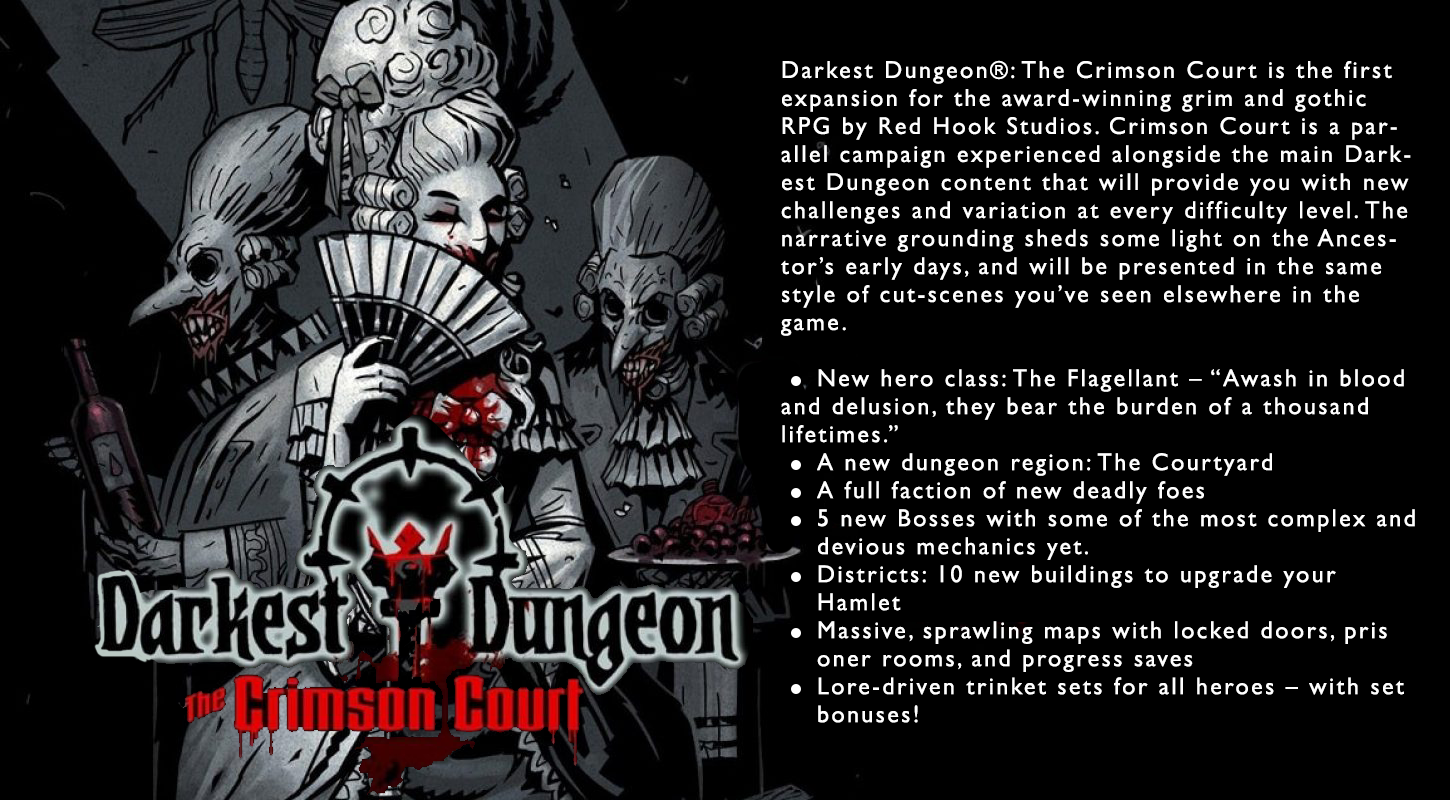
<style>
.page{position:relative;width:1450px;height:800px;background:#000000}
.page>*{position:absolute;margin:0}
.t1{font:24.5px/28px "GillSansMT";letter-spacing:0.1em;color:#ffffff}
</style>
<div class="page">
<p class="t1" style="left:781px;top:60px;width:634px;height:663px">Darkest Dungeon®: The Crimson Court is the first expansion for the award-winning grim and gothic RPG by Red Hook Studios. Crimson Court is a parallel campaign experienced alongside the main Darkest Dungeon content that will provide you with new challenges and variation at every difficulty level. The narrative grounding sheds some light on the Ancestor’s early days, and will be presented in the same style of cut-scenes you’ve seen elsewhere in the game.<br><br> New hero class: The Flagellant – “Awash in blood and delusion, they bear the burden of a thousand lifetimes.”<br> A new dungeon region: The Courtyard<br> A full faction of new deadly foes<br> 5 new Bosses with some of the most complex and   devious mechanics yet.<br> Districts: 10 new buildings to upgrade your     Hamlet<br> Massive, sprawling maps with locked doors, pris   oner rooms, and progress saves<br> Lore-driven trinket sets for all heroes – with set   bonuses!</p>
</div>
